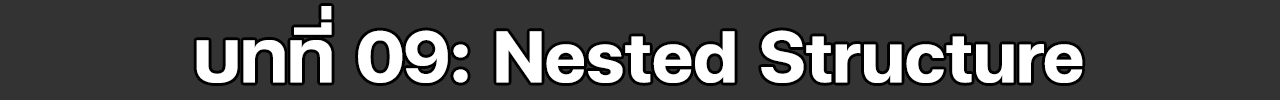
<style>
.page{position:relative;width:1280px;height:100px;background:#333333}
.page>*{position:absolute;margin:0}
.t1{font:100px "FCMinimalBold";color:#ffffff}
</style>
<div class="page">
<p class="t1" style="left:196px;top:6px;width:887px;height:77px">บทที่ 09: Nested Structure</p>
</div>
